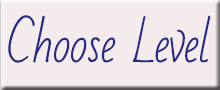
<style>
.page{position:relative;width:220px;height:90px;background:#f4ecec}
.page>*{position:absolute;margin:0}
.t1{font:48px "BadScript-Regular";letter-spacing:-0.025em;color:#282887}
</style>
<div class="page">
<p class="t1" style="left:8px;top:15px;width:203px;height:48px">Choose Level</p>
</div>
